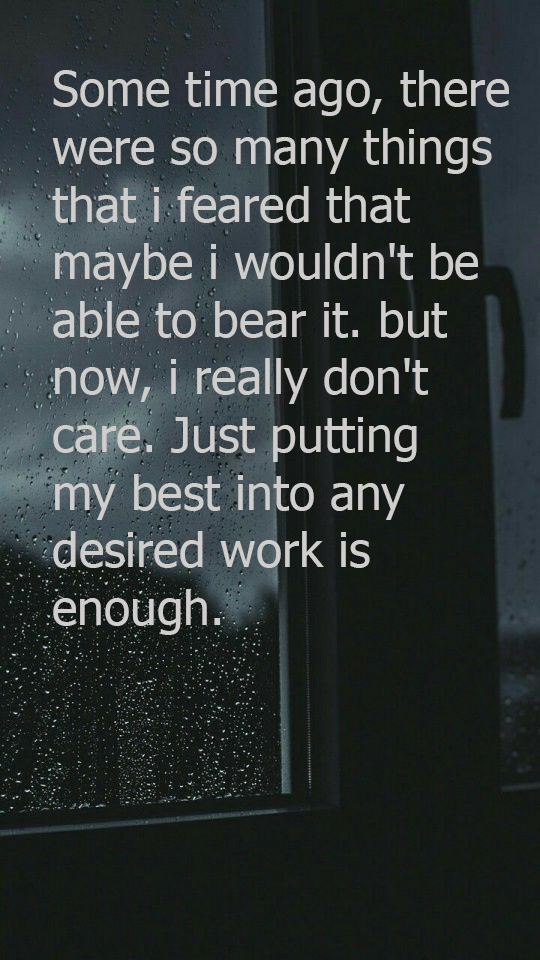
<style>
.page{position:relative;width:540px;height:960px}
.page>*{position:absolute;margin:0}
.t1{font:48px "Tahoma";color:#d0cdcd}
</style>
<div class="page">
<p class="t1" style="left:52px;top:70px;width:457px;height:565px">Some time ago, there were so many things that i feared that maybe i wouldn't be able to bear it. but now, i really don't care. Just putting <br>my best into any desired work is enough.</p>
</div>
